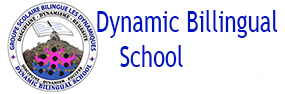
<style>
.page{position:relative;width:285px;height:94px;background:#ffffff}
.page>*{position:absolute;margin:0}
.t1{font:29.7px "TrebuchetMS";color:#0013c0;scale:0.74 1}
</style>
<div class="page">
<p class="t1" style="left:97px;top:10px;width:181px;height:57px;text-align:center">Dynamic Billingual <br>School</p>
</div>
